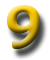
<style>
.page{position:relative;width:50px;height:60px;background:#ffffff}
.page>*{position:absolute;margin:0}
.t1{font:60px "MaiandraGD-DemiBold"}
</style>
<div class="page">
<p class="t1" style="left:7px;top:5px;width:33px;height:44px">9</p>
</div>
